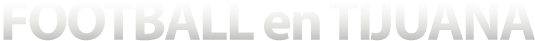
<style>
.page{position:relative;width:535px;height:41px;background:#ffffff}
.page>*{position:absolute;margin:0}
.t1{font:57px "MyriadPro-Bold";letter-spacing:-0.04em;color:#eae9e8}
</style>
<div class="page">
<p class="t1" style="left:3px;top:0px;width:532px;height:41px">FOOTBALL en TIJUANA</p>
</div>
